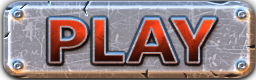
<style>
.page{position:relative;width:256px;height:80px}
.page>*{position:absolute;margin:0}
.t1{font:61.8px "SegoeUI-Bold";scale:1.17 1}
</style>
<div class="page">
<p class="t1" style="left:49px;top:19px;width:167px;height:44px">PLAY</p>
</div>
